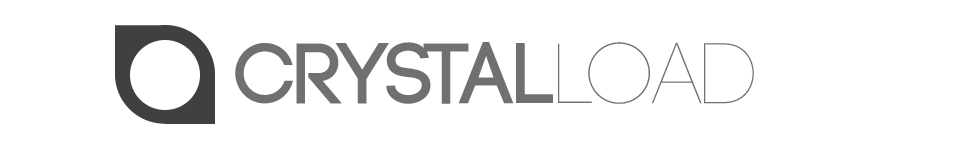
<style>
.page{position:relative;width:960px;height:150px;background:#ffffff}
.page>*{position:absolute;margin:0}
.t1{font:86px "Code-Bold";letter-spacing:-0.01em;color:#707070}
.t2{font:86px "Code-Light";letter-spacing:-0.01em;color:#707070}
</style>
<div class="page">
<p class="t1" style="left:235px;top:42px;width:519px;height:62px">CRystal<span class="t2">Load</span></p>
</div>
